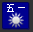
<style>
.page{position:relative;width:33px;height:32px;background:#000090}
.page>*{position:absolute;margin:0}
.t1{font:10.4px "SimSun";color:#ffffff}
</style>
<div class="page">
<p class="t1" style="left:7px;top:4px;width:18px;height:8px">五一</p>
</div>
